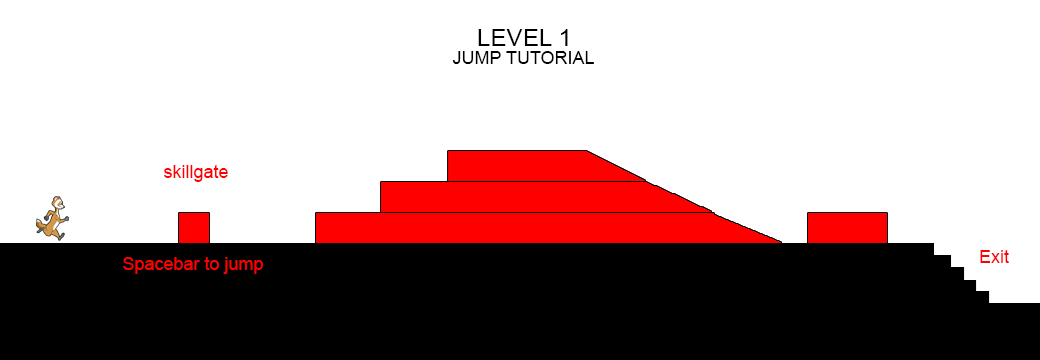
<style>
.page{position:relative;width:1040px;height:360px;background:#ffffff}
.page>*{position:absolute;margin:0}
.t1{font:24px "ArialMT";color:#000000}
.t2{font:18px "ArialMT";color:#000000}
.t3{font:18px "ArialMT";color:#ff0000}
</style>
<div class="page">
<p class="t1" style="left:478px;top:29px;width:90px;height:17px">LEVEL 1</p>
<p class="t2" style="left:452px;top:51px;width:142px;height:13px">JUMP TUTORIAL</p>
<p class="t3" style="left:164px;top:165px;width:64px;height:17px">skillgate</p>
<p class="t3" style="left:123px;top:257px;width:140px;height:17px">Spacebar to jump</p>
<p class="t3" style="left:980px;top:250px;width:29px;height:13px">Exit</p>
</div>
